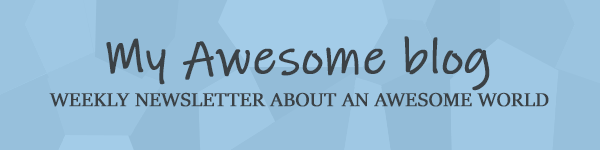
<style>
.page{position:relative;width:600px;height:150px;background:#97c0dc}
.page>*{position:absolute;margin:0}
.t1{font:50px "InkFree";color:#3b4145;font-weight:bold}
.t2{font:21.1px "SitkaBanner";color:#3b4145;text-transform:uppercase;font-weight:bold;scale:1.04 1}
</style>
<div class="page">
<p class="t1" style="left:106px;top:36px;width:384px;height:55px">My Awesome blog</p>
<p class="t2" style="left:49px;top:92px;width:500px;height:15px">Weekly Newsletter about an awesome world</p>
</div>
